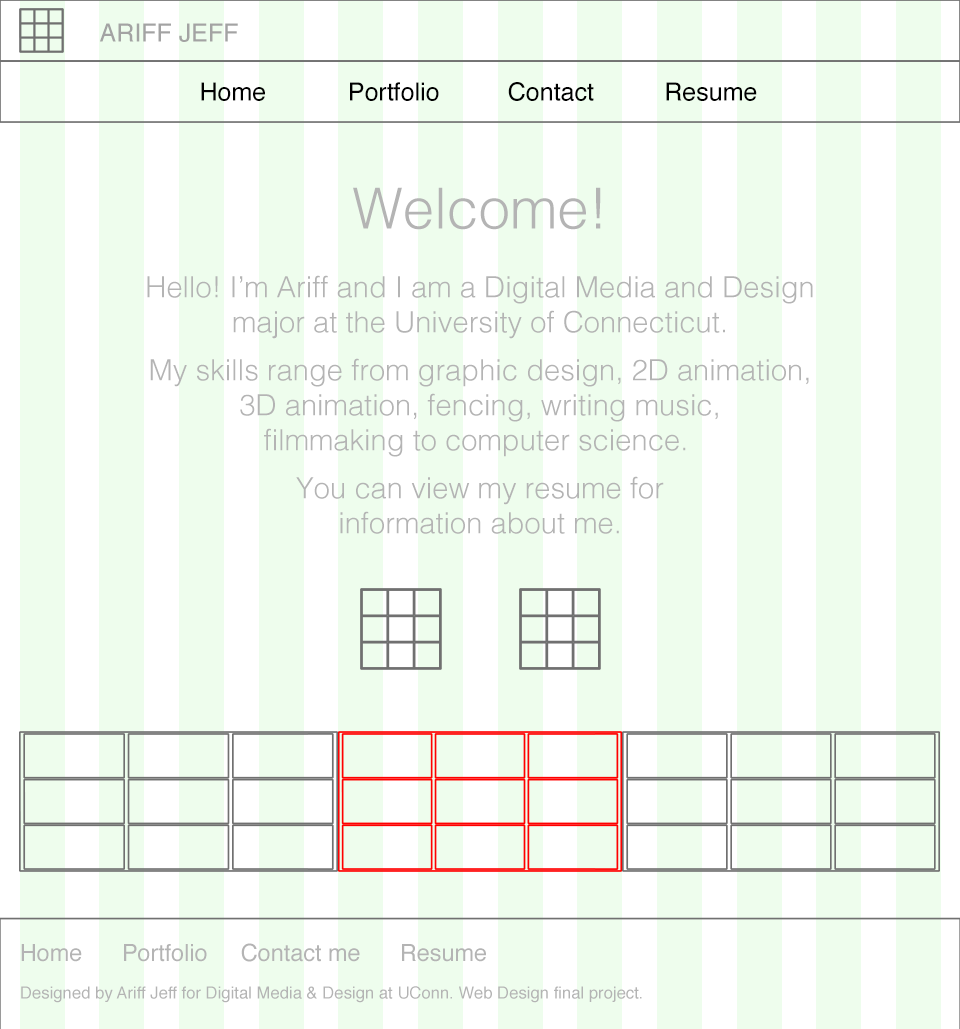
<style>
.page{position:relative;width:960px;height:1029px;background:#eefded}
.page>*{position:absolute;margin:0}
.t1{font:25px "Helvetica";color:#a3a3a3}
.t2{font:25px "Helvetica";color:#000000}
.t3{font:56.8px "Helvetica-Light";color:#b4b4b4}
.t4{font:29.2px "Helvetica-Light";color:#b4b4b4}
.t5{font:23.4px "Helvetica";color:#b4b4b4}
.t6{font:16.7px "Helvetica";color:#b4b4b4}
</style>
<div class="page">
<p class="t1" style="left:100px;top:23px;width:138px;height:19px">ARIFF JEFF</p>
<p class="t2" style="left:201px;top:82px;width:64px;height:19px">Home</p>
<p class="t2" style="left:350px;top:82px;width:89px;height:19px">Portfolio</p>
<p class="t2" style="left:508px;top:82px;width:86px;height:19px">Contact</p>
<p class="t2" style="left:666px;top:82px;width:91px;height:19px">Resume</p>
<p class="t3" style="left:353px;top:187px;width:248px;height:43px">Welcome!</p>
<p class="t4" style="left:147px;top:275px;width:666px;height:64px;text-align:center">Hello! I’m Ariff and I am a Digital Media and Design<br>major at the University of Connecticut.</p>
<p class="t4" style="left:150px;top:358px;width:659px;height:99px;text-align:center">My skills range from graphic design, 2D animation,<br>3D animation, fencing, writing music,<br>filmmaking to computer science.</p>
<p class="t4" style="left:296px;top:476px;width:368px;height:58px;text-align:center">You can view my resume for<br>information about me.</p>
<p class="t5" style="left:21px;top:944px;width:61px;height:18px">Home</p>
<p class="t5" style="left:124px;top:944px;width:83px;height:18px">Portfolio</p>
<p class="t5" style="left:241px;top:943px;width:119px;height:19px">Contact me</p>
<p class="t5" style="left:402px;top:944px;width:84px;height:18px">Resume</p>
<p class="t6" style="left:21px;top:986px;width:621px;height:17px">Designed by Ariff Jeff for Digital Media &amp; Design at UConn. Web Design final project.</p>
</div>
